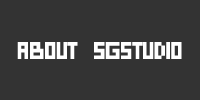
<style>
.page{position:relative;width:200px;height:100px;background:#333333}
.page>*{position:absolute;margin:0}
.t1{font:24px "PixelCyr-Normal";color:#ffffff}
</style>
<div class="page">
<p class="t1" style="left:17px;top:42px;width:165px;height:17px">ABOUT SGSTUDIO</p>
</div>
